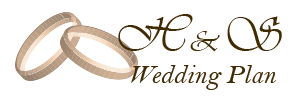
<style>
.page{position:relative;width:300px;height:100px;background:#ffffff}
.page>*{position:absolute;margin:0}
.t1{font:50px "Vivaldii";letter-spacing:0.1em;color:#422b03}
.t2{font:30px "Vivaldii";letter-spacing:0.1em;color:#422b03}
.t3{font:27px "BellMTItalic";color:#422b03}
</style>
<div class="page">
<p class="t1" style="left:118px;top:14px;width:164px;height:38px">H<span class="t2">&amp;</span>S</p>
<p class="t3" style="left:131px;top:65px;width:145px;height:25px">Wedding Plan</p>
</div>
